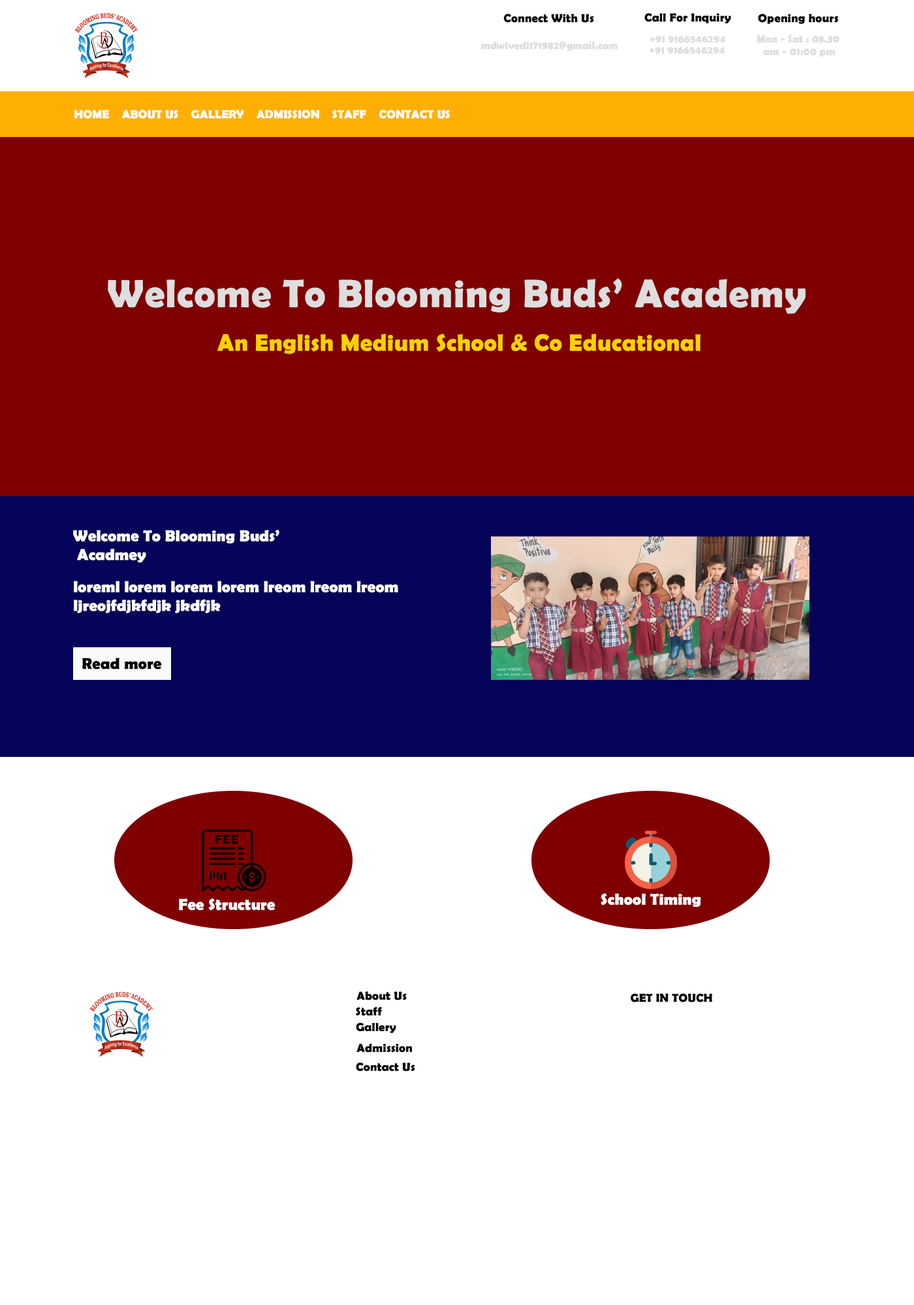
<style>
.page{position:relative;width:914px;height:1305px;background:#ffffff}
.page>*{position:absolute;margin:0}
.t1{font:11.7px "BerlinSansFBDemi-Bold";color:#010101;font-weight:bold}
.t2{font:10.4px "BerlinSansFBDemi-Bold";color:#dedede;font-weight:bold}
.t3{font:11.7px "BerlinSansFBDemi-Bold";color:#ffffff;font-weight:bold}
.t4{font:39.2px "BerlinSansFBDemi-Bold";color:#dedede;font-weight:bold}
.t5{font:23.5px "BerlinSansFBDemi-Bold";color:#f8d200;font-weight:bold}
.t6{font:15.7px "BerlinSansFBDemi-Bold";color:#fefefe;font-weight:bold}
.t7{font:15.7px "BerlinSansFBDemi-Bold";color:#000000;font-weight:bold}
.t8{font:15.7px "BerlinSansFBDemi-Bold";color:#ffffff;font-weight:bold}
.t9{font:11.7px "BerlinSansFBDemi-Bold";color:#000000;font-weight:bold}
</style>
<div class="page">
<p class="t1" style="left:503px;top:14px;width:91px;height:9px">Connect With Us</p>
<p class="t1" style="left:644px;top:13px;width:87px;height:10px">Call For Inquiry</p>
<p class="t1" style="left:758px;top:14px;width:80px;height:10px">Opening hours</p>
<p class="t2" style="left:481px;top:41px;width:136px;height:10px">mdwivedi171982@gmail.com</p>
<p class="t2" style="left:650px;top:36px;width:76px;height:7px">+91 9166546294</p>
<p class="t2" style="left:756px;top:35px;width:83px;height:22px;text-align:center">Mon - Sat : 08.30 <br>am - 01:00 pm</p>
<p class="t2" style="left:649px;top:47px;width:76px;height:7px">+91 9166546294</p>
<p class="t3" style="left:74px;top:110px;width:35px;height:9px">HOME</p>
<p class="t3" style="left:122px;top:110px;width:56px;height:9px">ABOUT US</p>
<p class="t3" style="left:191px;top:110px;width:53px;height:9px">GALLERY</p>
<p class="t3" style="left:256px;top:110px;width:63px;height:9px">ADMISSION</p>
<p class="t3" style="left:332px;top:110px;width:34px;height:9px">STAFF</p>
<p class="t3" style="left:379px;top:110px;width:71px;height:9px">CONTACT US</p>
<p class="t4" style="left:108px;top:278px;width:697px;height:36px">Welcome To Blooming Buds’ Academy</p>
<p class="t5" style="left:217px;top:333px;width:483px;height:21px">An English Medium School &amp; Co Educational</p>
<p class="t6" style="left:73px;top:530px;width:206px;height:33px">Welcome To Blooming Buds’<br> Acadmey</p>
<p class="t6" style="left:74px;top:581px;width:324px;height:32px">loreml lorem lorem lorem lreom lreom lreom <br>ljreojfdjkfdjk jkdfjk</p>
<p class="t7" style="left:82px;top:658px;width:80px;height:12px">Read more</p>
<p class="t8" style="left:600px;top:893px;width:101px;height:14px">School Timing</p>
<p class="t8" style="left:179px;top:899px;width:96px;height:11px">Fee Structure</p>
<p class="t9" style="left:356px;top:991px;width:51px;height:9px">About Us</p>
<p class="t9" style="left:630px;top:993px;width:82px;height:9px">GET IN TOUCH</p>
<p class="t9" style="left:356px;top:1007px;width:26px;height:9px">Staff</p>
<p class="t1" style="left:356px;top:1023px;width:40px;height:10px">Gallery</p>
<p class="t1" style="left:356px;top:1043px;width:56px;height:10px">Admission</p>
<p class="t9" style="left:356px;top:1062px;width:59px;height:10px">Contact Us</p>
</div>
